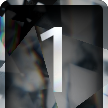
<style>
.page{position:relative;width:108px;height:108px}
.page>*{position:absolute;margin:0}
.t1{font:100px "MyriadPro-Regular";color:#e2e4e4}
</style>
<div class="page">
<p class="t1" style="left:40px;top:27px;width:22px;height:65px">1</p>
</div>
